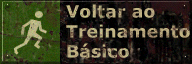
<style>
.page{position:relative;width:192px;height:64px}
.page>*{position:absolute;margin:0}
.t1{font:17px/20px "Verdana-Bold";letter-spacing:0.009em;color:#c3b584}
</style>
<div class="page">
<p class="t1" style="left:66px;top:4px;width:124px;height:54px">Voltar ao<br>Treinamento<br>Básico</p>
</div>
